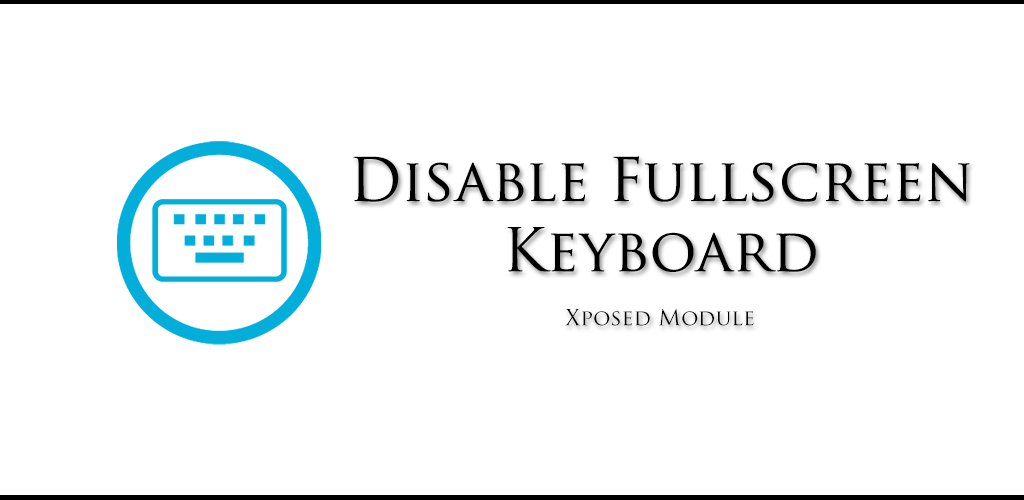
<style>
.page{position:relative;width:1024px;height:500px;background:#ffffff}
.page>*{position:absolute;margin:0}
.t1{font:58.5px "TrajanPro-Regular";color:#000000}
.t2{font:21.7px "TrajanPro-Regular";color:#000000}
</style>
<div class="page">
<p class="t1" style="left:353px;top:156px;width:617px;height:116px;text-align:center">Disable Fullscreen<br>Keyboard</p>
<p class="t2" style="left:565px;top:308px;width:189px;height:18px">Xposed Module</p>
</div>
